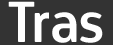
<style>
.page{position:relative;width:113px;height:45px;background:#333333}
.page>*{position:absolute;margin:0}
.t1{font:56px "Designosaur";color:#ffffff}
</style>
<div class="page">
<p class="t1" style="left:8px;top:1px;width:95px;height:42px">Tras</p>
</div>
